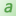
<style>
.page{position:relative;width:16px;height:16px}
.page>*{position:absolute;margin:0}
.t1{font:16px "MicrosoftJhengHeiUIRegular";letter-spacing:-0.2em;color:#53a047;font-weight:bold;font-style:italic}
</style>
<div class="page">
<p class="t1" style="left:4px;top:3px;width:9px;height:10px">a</p>
</div>
